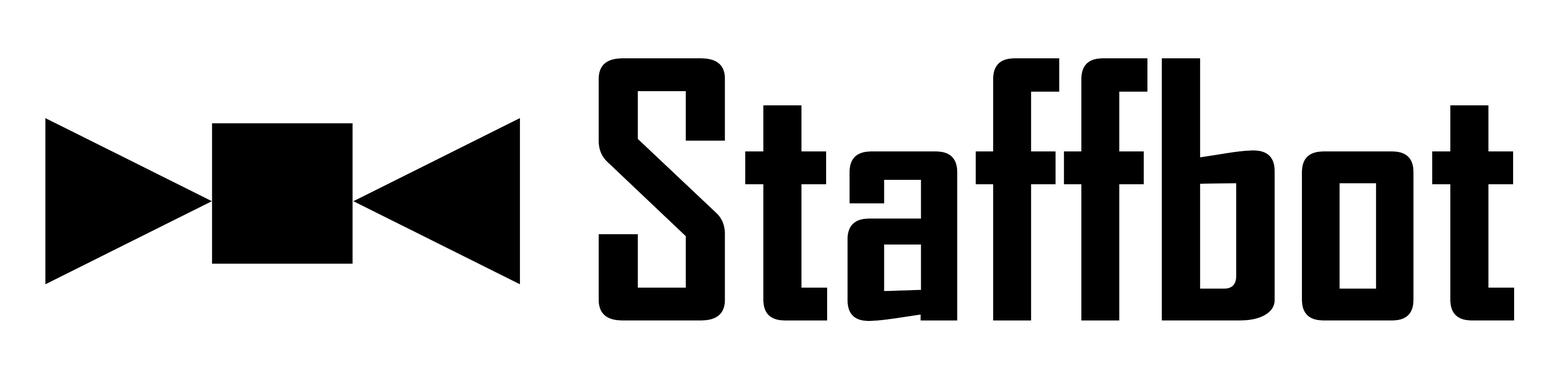
<style>
.page{position:relative;width:1568px;height:392px;background:#ffffff}
.page>*{position:absolute;margin:0}
.t1{font:343px "AgencyFB-Bold";color:#000000}
</style>
<div class="page">
<p class="t1" style="left:598px;top:58px;width:917px;height:263px">Staffbot</p>
</div>
